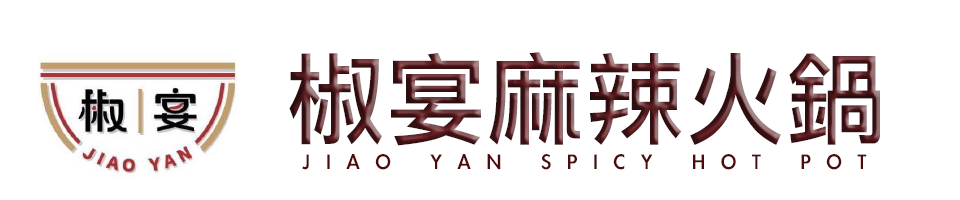
<style>
.page{position:relative;width:960px;height:200px;background:#ffffff}
.page>*{position:absolute;margin:0}
.t1{font:100px "LiHeiPro"}
.t2{font:24px "LiGothicMed";letter-spacing:0.66em;color:#4e0a0a}
</style>
<div class="page">
<p class="t1" style="left:289px;top:52px;width:591px;height:94px">椒宴麻辣火鍋</p>
<p class="t2" style="left:302px;top:154px;width:565px;height:16px">JIAO YAN SPICY HOT POT</p>
</div>
